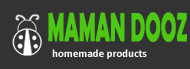
<style>
.page{position:relative;width:190px;height:69px;background:#333333}
.page>*{position:absolute;margin:0}
.t1{font:41.1px "BerlinSansFBDemi-Bold";color:#4bc714;scale:0.5 1}
.t2{font:11px "Calibri-Bold";color:#fbfbfb}
</style>
<div class="page">
<p class="t1" style="left:48px;top:12px;width:139px;height:30px">MAMAN DOOZ</p>
<p class="t2" style="left:52px;top:49px;width:95px;height:10px">homemade products</p>
</div>
